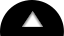
<style>
.page{position:relative;width:64px;height:36px;background:#000000}
.page>*{position:absolute;margin:0}
.t1{font:26px "MalgunGothic"}
</style>
<div class="page">
<p class="t1" style="left:22px;top:11px;width:21px;height:16px">▲</p>
</div>
